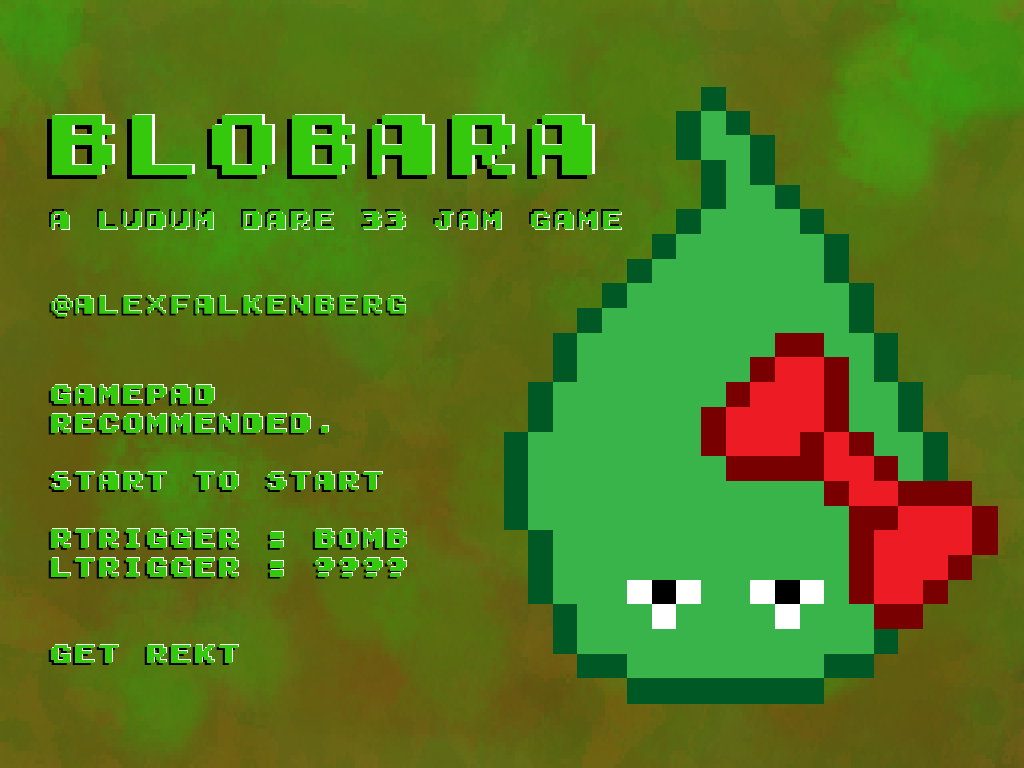
<style>
.page{position:relative;width:1024px;height:768px}
.page>*{position:absolute;margin:0}
.t1{font:24px "GamegirlClassic"}
.t2{font:24px "GamegirlClassic";color:#35c90d}
</style>
<div class="page">
<p class="t1" style="left:49px;top:209px;width:570px;height:18px">A Ludum dare 33 jam game</p>
<p class="t2" style="left:51px;top:211px;width:570px;height:18px">A Ludum Dare 33 Jam GAME</p>
<p class="t1" style="left:49px;top:297px;width:355px;height:22px">@Alexfalkenberg</p>
<p class="t2" style="left:51px;top:295px;width:355px;height:22px">@Alexfalkenberg</p>
<p class="t2" style="left:52px;top:295px;width:354px;height:21px">@Alexfalkenberg</p>
<p class="t1" style="left:48px;top:387px;width:355px;height:278px">Gamepad<br>recommended.<br><br>Start to start<br><br>RTRIGGER = BOMB<br>LTRIGGER = ????<br><br><br>GET REKT</p>
</div>
